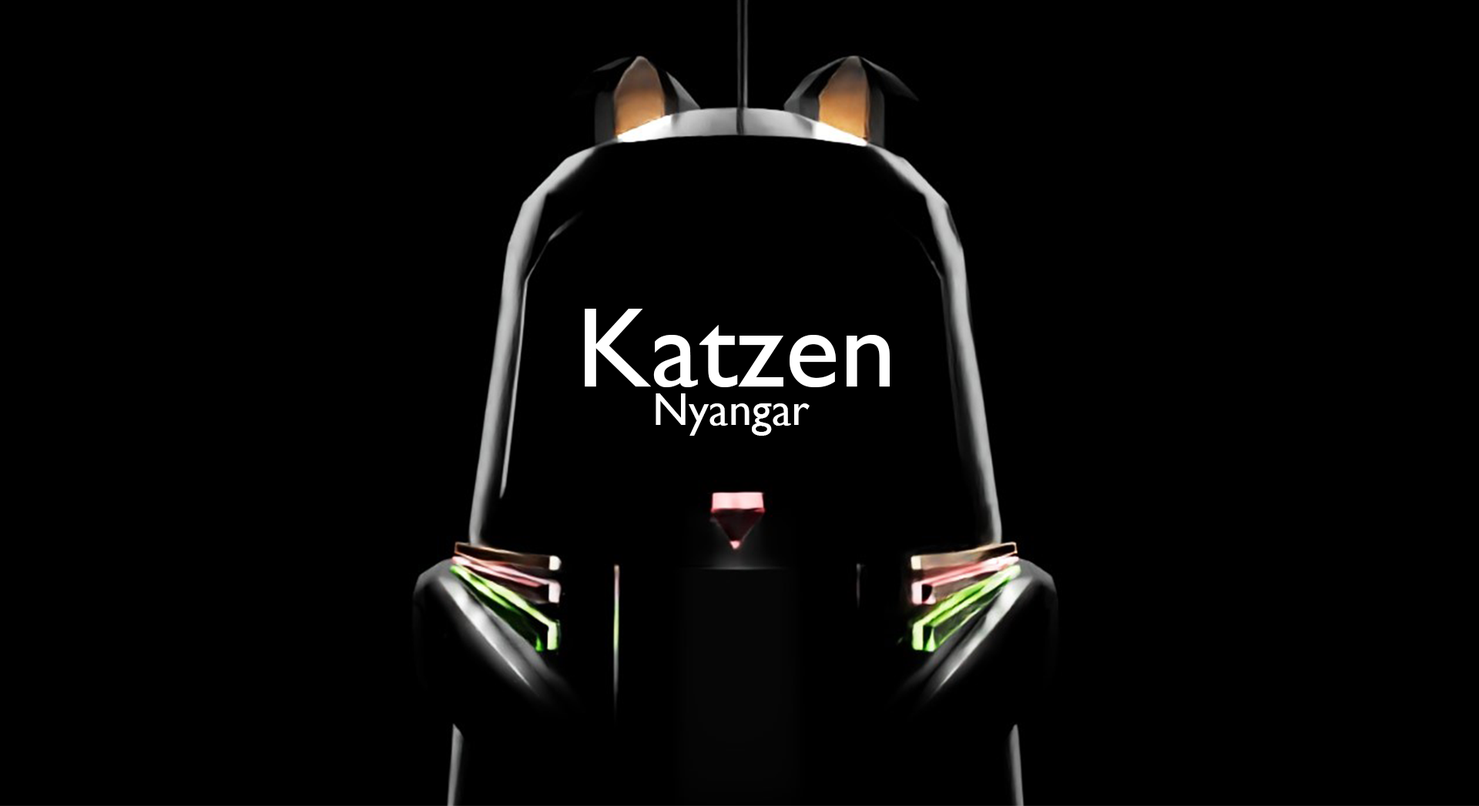
<style>
.page{position:relative;width:1479px;height:806px;background:#000000}
.page>*{position:absolute;margin:0}
.t1{font:113.8px "GillSansMT";color:#ffffff}
.t2{font:46.2px "GillSansMT";color:#ffffff}
</style>
<div class="page">
<p class="t1" style="left:585px;top:309px;width:305px;height:78px">Katzen</p>
<p class="t2" style="left:655px;top:394px;width:154px;height:42px">Nyangar</p>
</div>
